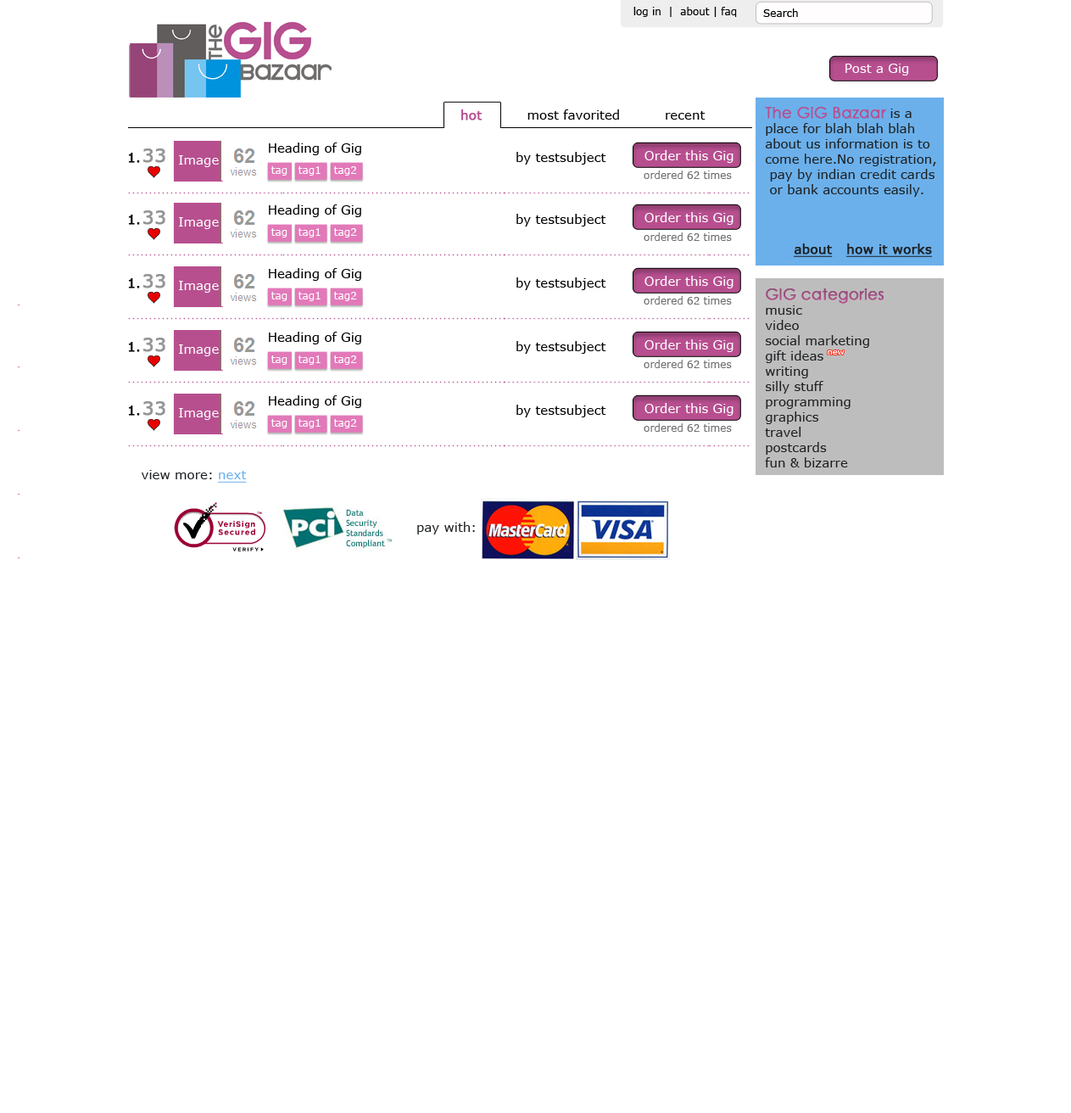
<style>
.page{position:relative;width:1071px;height:1113px;background:#ffffff}
.page>*{position:absolute;margin:0}
.t1{font:10.2px "Verdana";color:#000000}
.t2{font:12.7px "Verdana";color:#ffffff}
.t3{font:12.7px "Verdana";color:#020202}
.t4{font:12.7px "Verdana";color:#b74f8f;font-weight:bold}
.t5{font:12.7px "Verdana";color:#1d2022}
.t6{font:15.3px "CenturyGothic";color:#b74f8f;font-weight:bold}
.t7{font:18.7px "Verdana";color:#969594;font-weight:bold}
.t8{font:12.7px "Verdana";color:#010000}
.t9{font:12.7px "Verdana";color:#000000;font-weight:bold}
.t10{font:12.7px "Verdana";color:#fefefe}
.t11{font:10.2px "Verdana";color:#ffffff}
.t12{font:10.2px "Verdana";color:#72706f}
.t13{font:12.7px "Verdana";color:#1d2022;font-weight:bold;text-decoration:underline}
.t14{font:15.3px "CenturyGothic";color:#9f4d7f;font-weight:bold}
.t15{font:8.2px "Verdana";color:#ffffff}
.t16{font:12.7px "Verdana";color:#6bb0eb;text-decoration:underline}
</style>
<div class="page">
<p class="t1" style="left:634px;top:7px;width:103px;height:10px">log in  |  about | faq</p>
<p class="t1" style="left:763px;top:8px;width:35px;height:9px">Search</p>
<p class="t2" style="left:846px;top:64px;width:63px;height:11px">Post a Gig</p>
<p class="t3" style="left:461px;top:109px;width:245px;height:11px"><span class="t4">hot </span>         most favorited          recent</p>
<p class="t5" style="left:765px;top:107px;width:172px;height:90px"><span class="t6">The GiG Bazaar </span>is a <br>place for blah blah blah <br>about us information is to <br>come here.No registration,<br> pay by indian credit cards<br> or bank accounts easily.</p>
<p class="t7" style="left:143px;top:148px;width:22px;height:15px">33</p>
<p class="t8" style="left:269px;top:143px;width:92px;height:12px">Heading of Gig</p>
<p class="t9" style="left:128px;top:153px;width:12px;height:10px">1.</p>
<p class="t10" style="left:179px;top:155px;width:40px;height:12px">Image</p>
<p class="t8" style="left:517px;top:152px;width:90px;height:13px">by testsubject</p>
<p class="t2" style="left:645px;top:150px;width:89px;height:13px">Order this Gig</p>
<p class="t11" style="left:271px;top:166px;width:17px;height:10px">tag <span class="t2">1</span></p>
<p class="t11" style="left:299px;top:166px;width:22px;height:10px">tag1 <span class="t2">1</span></p>
<p class="t11" style="left:334px;top:166px;width:23px;height:10px">tag2<span class="t2">1</span></p>
<p class="t12" style="left:644px;top:171px;width:88px;height:8px">ordered 62 times</p>
<p class="t8" style="left:269px;top:204px;width:92px;height:13px">Heading of Gig</p>
<p class="t9" style="left:128px;top:215px;width:12px;height:10px">1.</p>
<p class="t7" style="left:143px;top:210px;width:22px;height:15px">33</p>
<p class="t10" style="left:179px;top:217px;width:40px;height:12px">Image</p>
<p class="t8" style="left:517px;top:214px;width:90px;height:12px">by testsubject</p>
<p class="t2" style="left:645px;top:212px;width:89px;height:13px">Order this Gig</p>
<p class="t11" style="left:271px;top:228px;width:17px;height:10px">tag <span class="t2">1</span></p>
<p class="t11" style="left:299px;top:228px;width:22px;height:10px">tag1 <span class="t2">1</span></p>
<p class="t11" style="left:334px;top:228px;width:23px;height:10px">tag2<span class="t2">1</span></p>
<p class="t12" style="left:644px;top:232px;width:88px;height:9px">ordered 62 times</p>
<p class="t13" style="left:794px;top:243px;width:138px;height:14px">about   how it works</p>
<p class="t8" style="left:269px;top:268px;width:92px;height:13px">Heading of Gig</p>
<p class="t9" style="left:128px;top:278px;width:12px;height:10px">1.</p>
<p class="t7" style="left:143px;top:274px;width:22px;height:14px">33</p>
<p class="t10" style="left:179px;top:281px;width:40px;height:12px">Image</p>
<p class="t8" style="left:517px;top:277px;width:90px;height:13px">by testsubject</p>
<p class="t2" style="left:645px;top:276px;width:89px;height:12px">Order this Gig</p>
<p class="t11" style="left:271px;top:292px;width:17px;height:9px">tag <span class="t2">1</span></p>
<p class="t11" style="left:299px;top:292px;width:22px;height:9px">tag1 <span class="t2">1</span></p>
<p class="t11" style="left:334px;top:292px;width:23px;height:9px">tag2<span class="t2">1</span></p>
<p class="t14" style="left:766px;top:288px;width:119px;height:16px">GIG categories</p>
<p class="t12" style="left:644px;top:296px;width:88px;height:9px">ordered 62 times</p>
<p class="t5" style="left:765px;top:305px;width:105px;height:162px">music<br>video<br>social marketing<br>gift ideas<br>writing<br>silly stuff<br>programming<br>graphics<br>travel<br>postcards<br>fun &amp; bizarre</p>
<p class="t9" style="left:128px;top:342px;width:12px;height:10px">1.</p>
<p class="t7" style="left:143px;top:338px;width:22px;height:14px">33</p>
<p class="t8" style="left:269px;top:332px;width:92px;height:12px">Heading of Gig</p>
<p class="t8" style="left:517px;top:341px;width:90px;height:13px">by testsubject</p>
<p class="t2" style="left:645px;top:339px;width:89px;height:13px">Order this Gig</p>
<p class="t10" style="left:179px;top:344px;width:40px;height:12px">Image</p>
<p class="t15" style="left:828px;top:350px;width:17px;height:5px">new</p>
<p class="t11" style="left:271px;top:355px;width:17px;height:10px">tag <span class="t2">1</span></p>
<p class="t11" style="left:299px;top:355px;width:22px;height:10px">tag1 <span class="t2">1</span></p>
<p class="t11" style="left:334px;top:355px;width:23px;height:10px">tag2<span class="t2">1</span></p>
<p class="t12" style="left:644px;top:360px;width:88px;height:8px">ordered 62 times</p>
<p class="t7" style="left:143px;top:401px;width:22px;height:15px">33</p>
<p class="t8" style="left:269px;top:395px;width:92px;height:13px">Heading of Gig</p>
<p class="t9" style="left:128px;top:405px;width:12px;height:11px">1.</p>
<p class="t10" style="left:179px;top:408px;width:40px;height:12px">Image</p>
<p class="t8" style="left:517px;top:405px;width:90px;height:12px">by testsubject</p>
<p class="t2" style="left:645px;top:403px;width:89px;height:13px">Order this Gig</p>
<p class="t11" style="left:271px;top:419px;width:17px;height:9px">tag <span class="t2">1</span></p>
<p class="t11" style="left:299px;top:419px;width:22px;height:9px">tag1 <span class="t2">1</span></p>
<p class="t11" style="left:334px;top:419px;width:23px;height:9px">tag2<span class="t2">1</span></p>
<p class="t12" style="left:644px;top:423px;width:88px;height:9px">ordered 62 times</p>
<p class="t5" style="left:142px;top:470px;width:105px;height:13px">view more: <span class="t16">next</span></p>
<p class="t5" style="left:417px;top:522px;width:58px;height:12px">pay with:</p>
</div>
